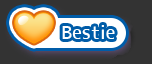
<style>
.page{position:relative;width:152px;height:64px;background:#333333}
.page>*{position:absolute;margin:0}
.t1{font:18px "JK-Gothic-M";color:#ffffff}
</style>
<div class="page">
<p class="t1" style="left:62px;top:25px;width:53px;height:14px">Bestie</p>
</div>
